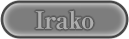
<style>
.page{position:relative;width:129px;height:39px;background:#7d7d7d}
.page>*{position:absolute;margin:0}
.t1{font:24px "RyuminPro-ExBold";letter-spacing:-0.04em;color:#acadae}
</style>
<div class="page">
<p class="t1" style="left:35px;top:10px;width:59px;height:20px">Irako</p>
</div>
